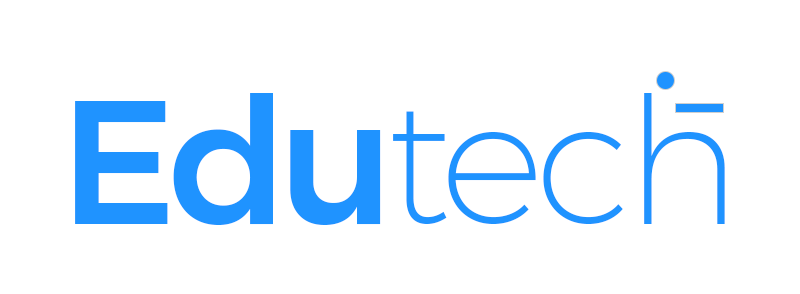
<style>
.page{position:relative;width:800px;height:294px;background:#ffffff}
.page>*{position:absolute;margin:0}
.t1{font:175.8px "Montserrat-ExtraLight";letter-spacing:-0.05em;color:#1f93ff}
.t2{font:175.8px "Montserrat-Medium";letter-spacing:-0.05em;color:#1f93ff}
</style>
<div class="page">
<p class="t1" style="left:75px;top:93px;width:650px;height:132px"><span class="t2">Edu</span>tech</p>
</div>
